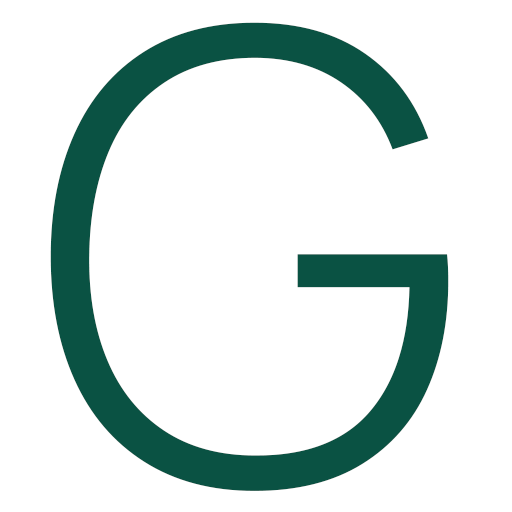
<style>
.page{position:relative;width:512px;height:512px;background:#ffffff}
.page>*{position:absolute;margin:0}
.t1{font:625px "Manrope-Light";color:#0a5243}
</style>
<div class="page">
<p class="t1" style="left:50px;top:22px;width:399px;height:469px">G</p>
</div>
